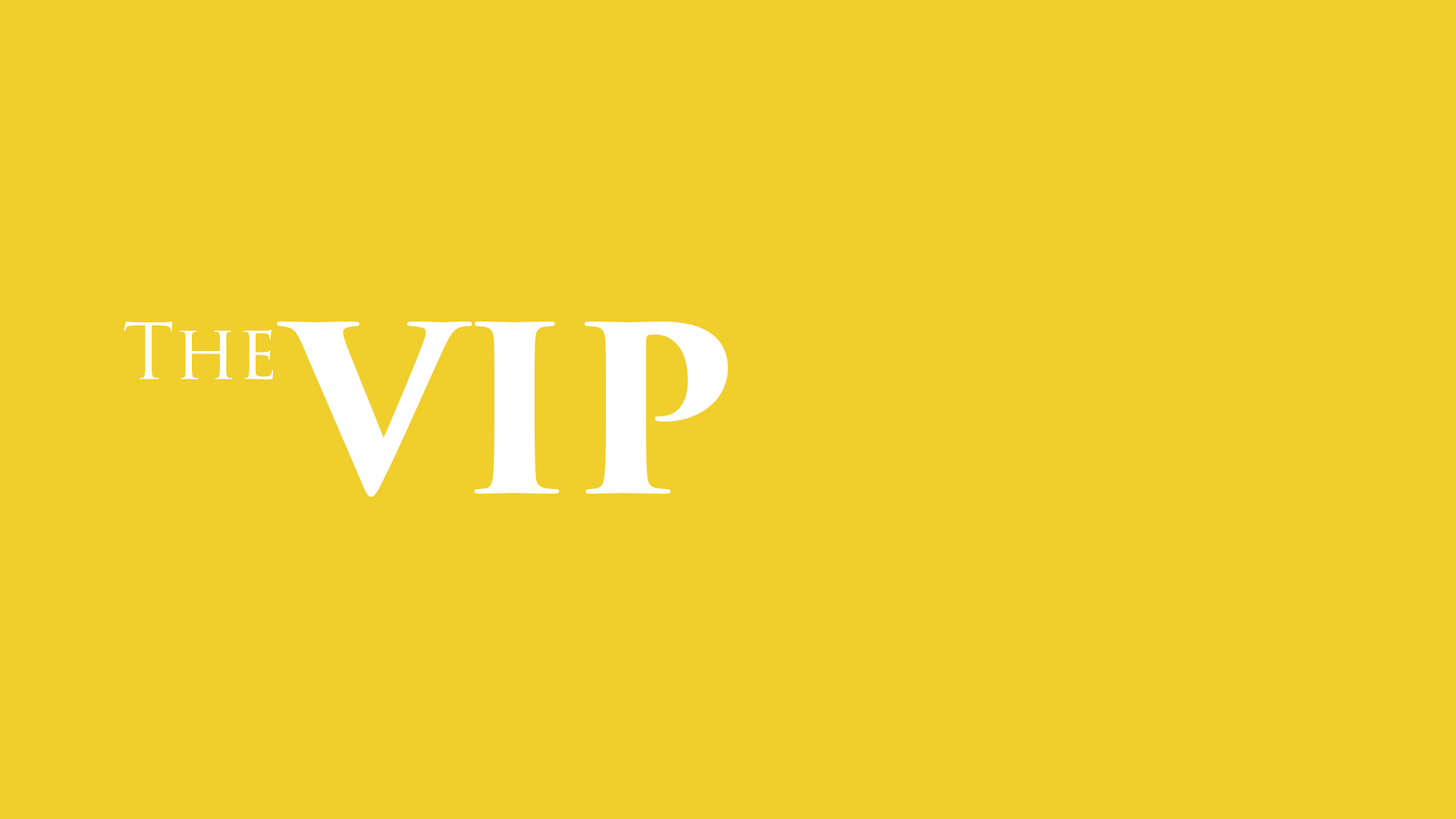
<style>
.page{position:relative;width:1456px;height:819px;background:#f0ce2b}
.page>*{position:absolute;margin:0}
.t1{font:75.8px "TrajanPro3-Regular";color:#ffffff}
.t2{font:227.5px "TrajanPro3-Bold";color:#ffffff}
</style>
<div class="page">
<p class="t1" style="left:124px;top:322px;width:150px;height:58px">The</p>
<p class="t2" style="left:277px;top:322px;width:451px;height:175px">VIP</p>
</div>
